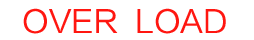
<style>
.page{position:relative;width:254px;height:40px;background:#ffffff}
.page>*{position:absolute;margin:0}
.t1{font:30.6px "FZLTZHUNHK--GBK1-0";color:#ff1610}
</style>
<div class="page">
<p class="t1" style="left:23px;top:8px;width:203px;height:26px">OVER  LOAD</p>
</div>
